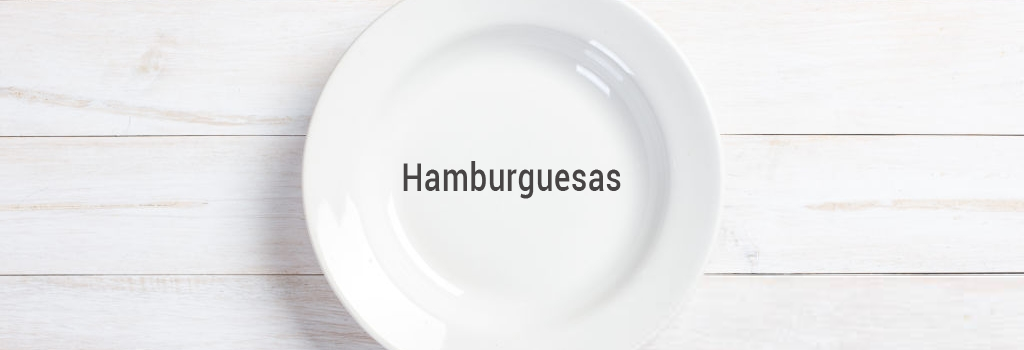
<style>
.page{position:relative;width:1024px;height:350px}
.page>*{position:absolute;margin:0}
.t1{font:38.6px "Roboto-Medium";letter-spacing:0.025em;color:#474444;scale:0.8 1}
</style>
<div class="page">
<p class="t1" style="left:403px;top:161px;width:218px;height:38px">Hamburguesas</p>
</div>
